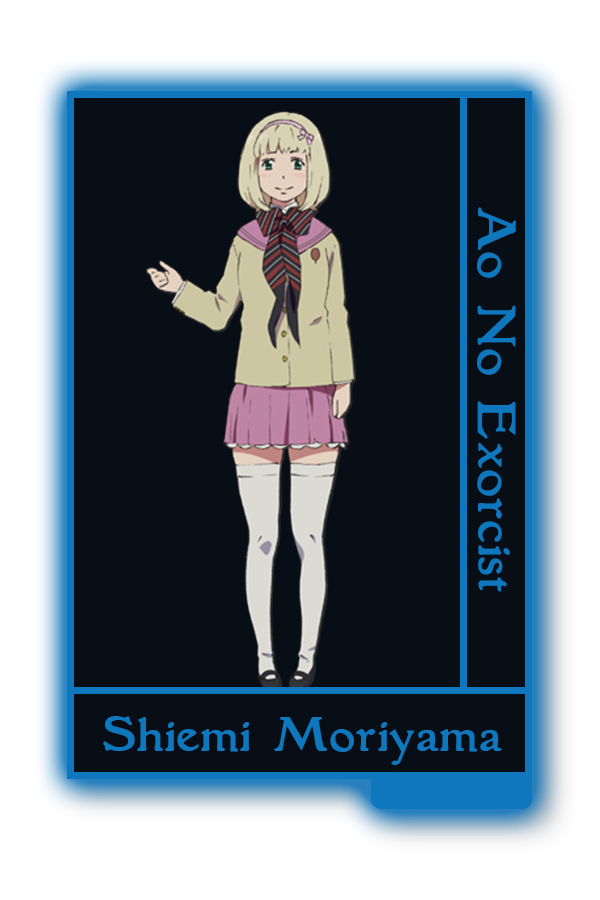
<style>
.page{position:relative;width:600px;height:900px;background:#070e16}
.page>*{position:absolute;margin:0}
.t1{font:48.8px "Grantham-Roman";color:#0f77be}
.t2{font:45.6px "Grantham-Roman";color:#0f77be}
</style>
<div class="page">
<p class="t1" style="left:477px;top:207px;width:39px;height:385px;rotate:90deg">Ao No Exorcist</p>
<p class="t2" style="left:103px;top:716px;width:399px;height:49px">Shiemi Moriyama</p>
</div>
